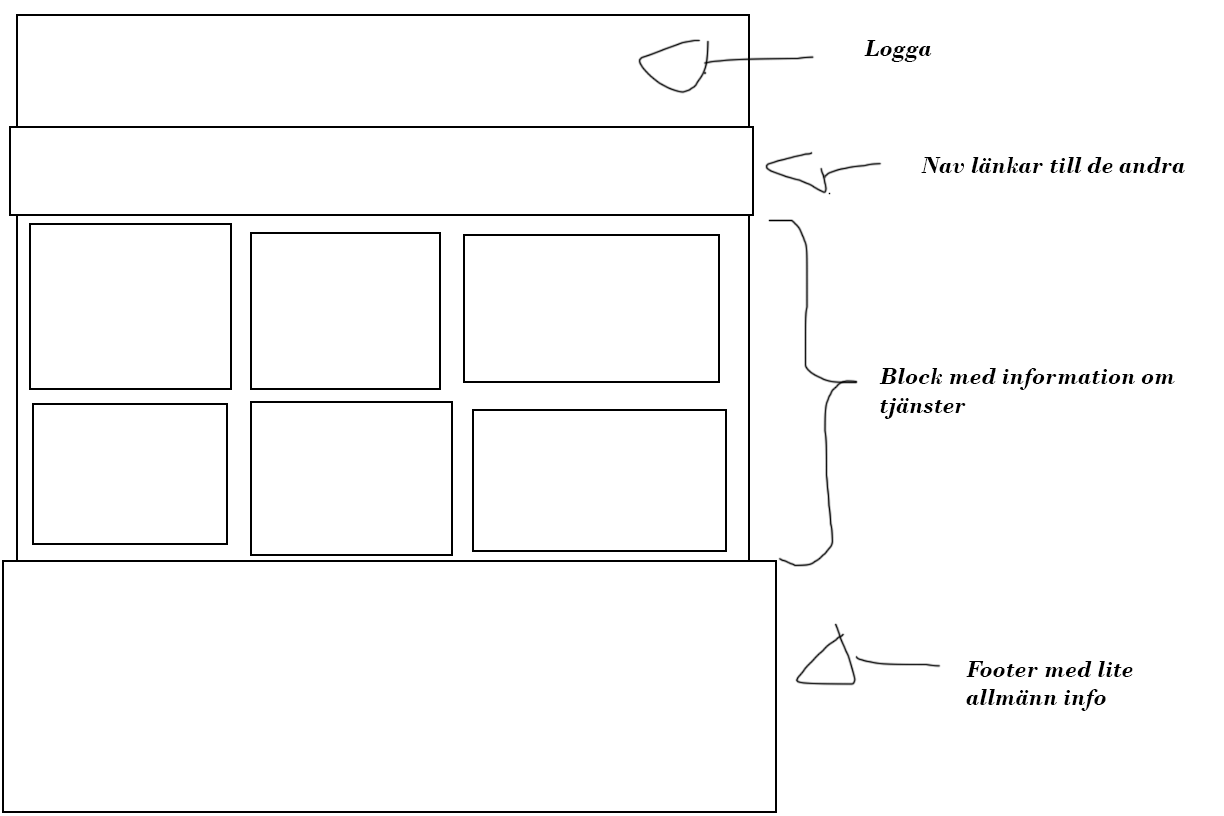
<style>
.page{position:relative;width:1224px;height:816px;background:#ffffff}
.page>*{position:absolute;margin:0}
.t1{font:24px "BodoniMT-BoldItalic";color:#000000}
</style>
<div class="page">
<p class="t1" style="left:864px;top:40px;width:68px;height:22px">Logga</p>
<p class="t1" style="left:921px;top:157px;width:264px;height:16px">Nav länkar till de andra</p>
<p class="t1" style="left:879px;top:368px;width:296px;height:51px">Block med information om<br>tjänster</p>
<p class="t1" style="left:966px;top:661px;width:167px;height:50px">Footer med lite<br>allmänn info</p>
</div>
